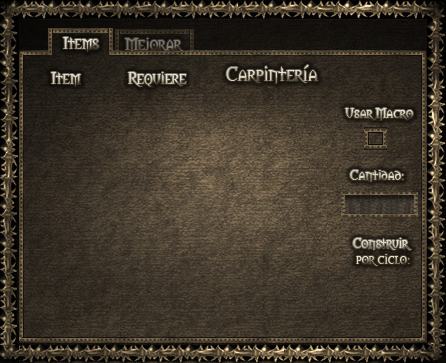
<style>
.page{position:relative;width:446px;height:363px}
.page>*{position:absolute;margin:0}
.t1{font:16px "Morpheus"}
.t2{font:18.7px "Morpheus"}
.t3{font:16px "Morpheus";color:#dcd6c3}
.t4{font:13.3px "Morpheus"}
.t5{font:13.3px "Morpheus";color:#d9d3bf}
.t6{font:13.3px "Morpheus";color:#dcd7c4}
</style>
<div class="page">
<p class="t1" style="left:63px;top:37px;width:36px;height:15px">Items</p>
<p class="t2" style="left:226px;top:65px;width:92px;height:19px">Carpintería</p>
<p class="t3" style="left:51px;top:72px;width:30px;height:15px">Item</p>
<p class="t1" style="left:128px;top:72px;width:59px;height:15px">Requiere</p>
<p class="t4" style="left:345px;top:108px;width:68px;height:13px">Usar Macro</p>
<p class="t5" style="left:350px;top:170px;width:54px;height:12px">Cantidad:</p>
<p class="t6" style="left:353px;top:238px;width:59px;height:28px">Construir<br> por ciclo:</p>
</div>
